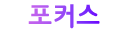
<style>
.page{position:relative;width:128px;height:32px;background:#ffffff}
.page>*{position:absolute;margin:0}
.t1{font:26.7px "12LotteMartDreamBold";text-transform:uppercase}
</style>
<div class="page">
<p class="t1" style="left:28px;top:4px;width:72px;height:25px">포커스</p>
</div>
